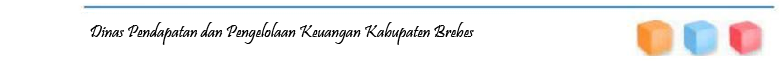
<style>
.page{position:relative;width:780px;height:61px;background:#ffffff}
.page>*{position:absolute;margin:0}
.t1{font:18px "Pristina-Regular";color:#000000}
</style>
<div class="page">
<p class="t1" style="left:90px;top:22px;width:384px;height:23px">Dinas Pendapatan dan Pengelolaan Keuangan Kabupaten Brebes</p>
</div>
